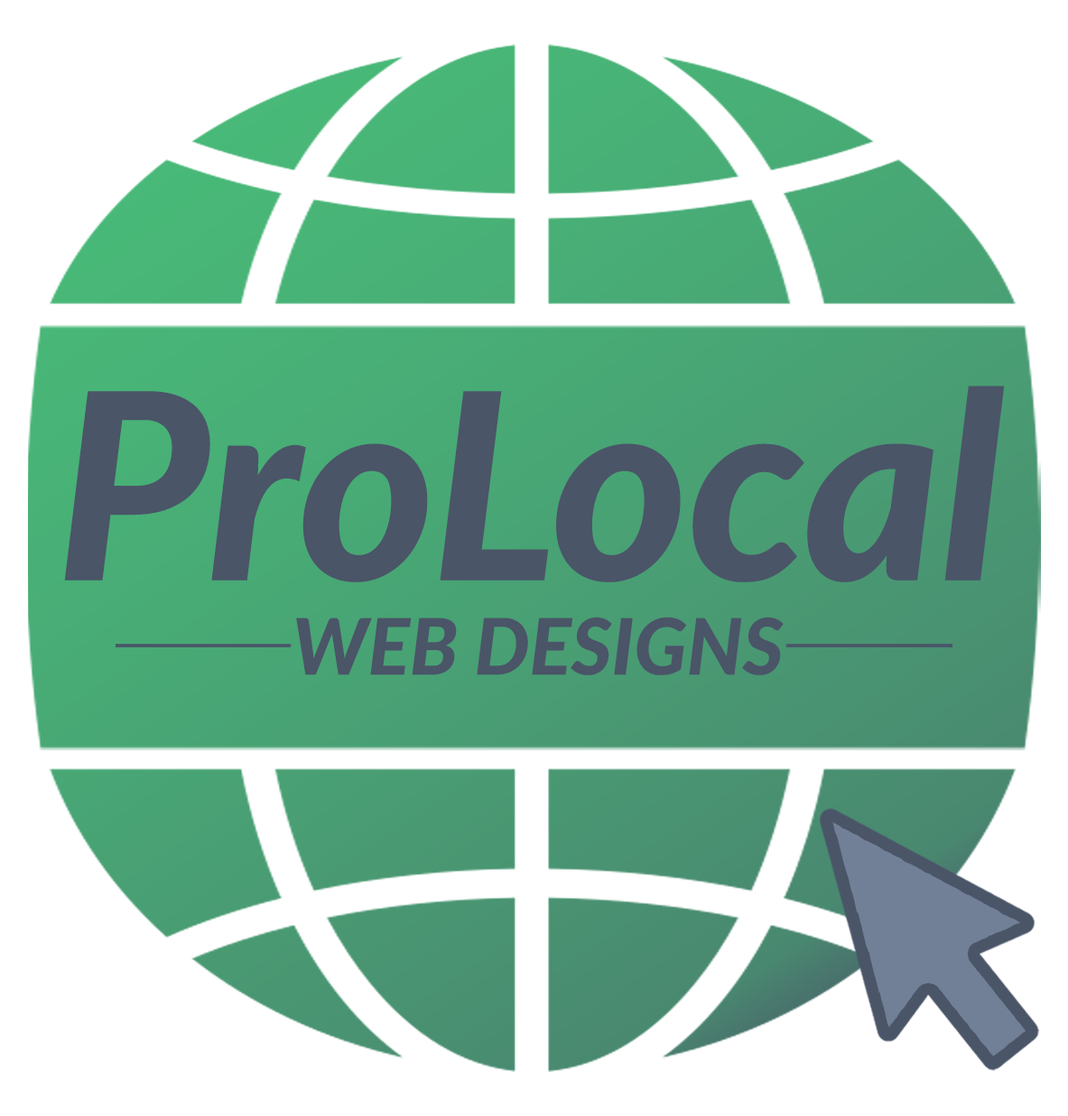
<style>
.page{position:relative;width:1068px;height:1116px;background:#ffffff}
.page>*{position:absolute;margin:0}
.t1{font:260.5px "Lato-HeavyItalic";color:#4a5568}
.t2{font:77.8px "Lato-HeavyItalic";color:#4a5568}
</style>
<div class="page">
<p class="t1" style="left:64px;top:386px;width:941px;height:196px">ProLocal</p>
<p class="t2" style="left:296px;top:617px;width:488px;height:58px">WEB DESIGNS</p>
</div>
